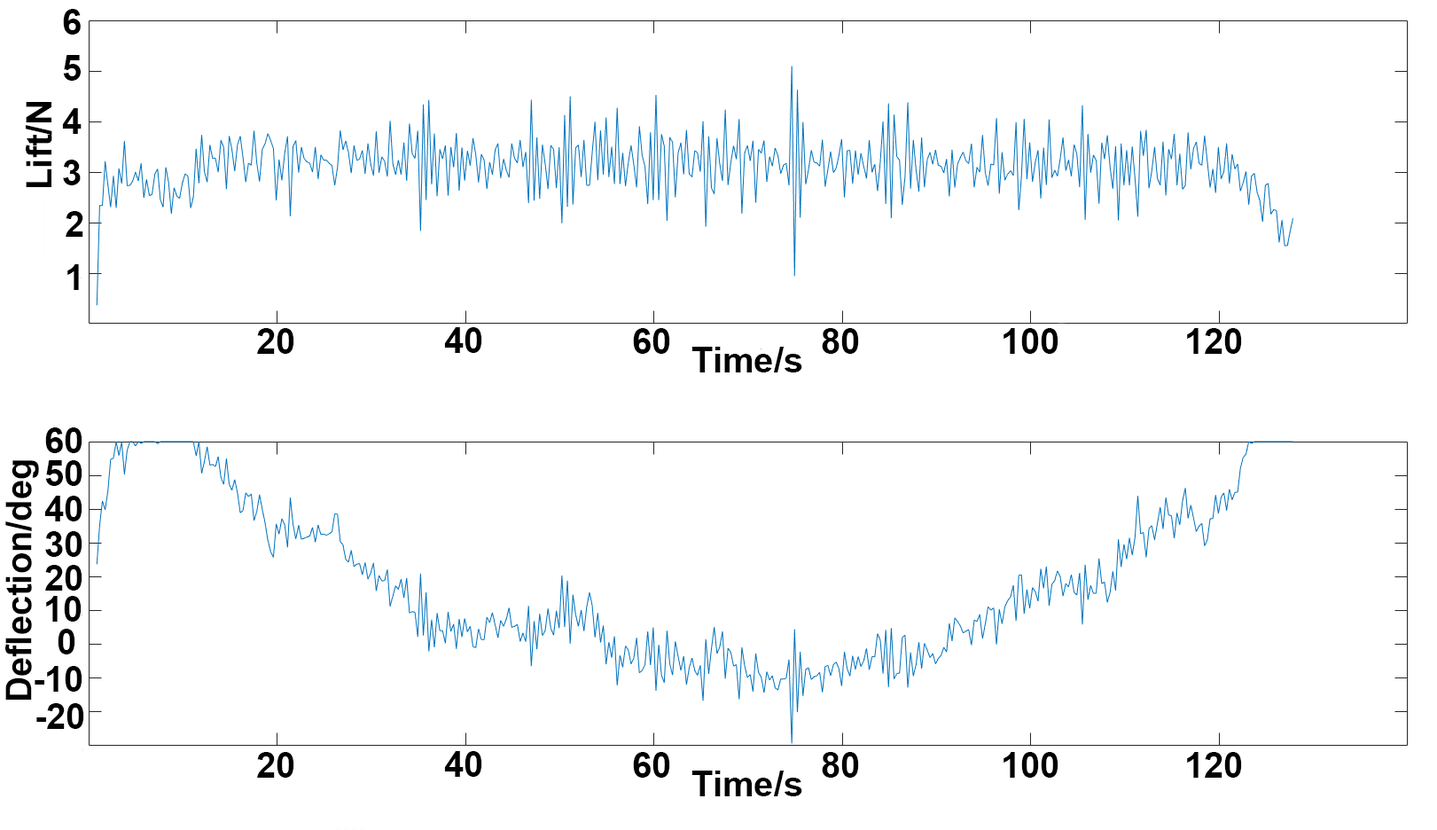
<style>
.page{position:relative;width:1437px;height:830px;background:#ffffff}
.page>*{position:absolute;margin:0}
.t1{font:35.5px "Arial-BoldMT";color:#000000}
.t2{font:35.2px "Arial-BoldMT";color:#000000}
.t3{font:35.4px "Arial-BoldMT";color:#000000}
</style>
<div class="page">
<p class="t1" style="left:63px;top:9px;width:18px;height:26px">6</p>
<p class="t1" style="left:63px;top:55px;width:18px;height:26px">5</p>
<p class="t2" style="left:26px;top:102px;width:26px;height:85px;rotate:-90deg">Lift/N</p>
<p class="t1" style="left:62px;top:108px;width:20px;height:26px">4</p>
<p class="t1" style="left:63px;top:160px;width:18px;height:25px">3</p>
<p class="t1" style="left:66px;top:211px;width:17px;height:26px">2</p>
<p class="t1" style="left:67px;top:264px;width:12px;height:26px">1</p>
<p class="t1" style="left:257px;top:328px;width:37px;height:26px">20</p>
<p class="t1" style="left:444px;top:327px;width:38px;height:26px">40</p>
<p class="t1" style="left:633px;top:328px;width:37px;height:26px">60</p>
<p class="t1" style="left:822px;top:328px;width:37px;height:26px">80</p>
<p class="t1" style="left:1004px;top:328px;width:55px;height:26px">100</p>
<p class="t1" style="left:1187px;top:328px;width:55px;height:26px">120</p>
<p class="t1" style="left:691px;top:347px;width:111px;height:25px">Time/s</p>
<p class="t1" style="left:45px;top:427px;width:37px;height:26px">60</p>
<p class="t3" style="left:5px;top:460px;width:34px;height:239px;rotate:-90deg">Deflection/deg</p>
<p class="t1" style="left:45px;top:460px;width:37px;height:26px">50</p>
<p class="t1" style="left:44px;top:496px;width:38px;height:25px">40</p>
<p class="t1" style="left:45px;top:531px;width:37px;height:26px">30</p>
<p class="t1" style="left:45px;top:565px;width:37px;height:25px">20</p>
<p class="t2" style="left:46px;top:596px;width:36px;height:25px">10</p>
<p class="t2" style="left:58px;top:629px;width:17px;height:25px">0</p>
<p class="t1" style="left:35px;top:666px;width:47px;height:25px">-10</p>
<p class="t1" style="left:36px;top:703px;width:48px;height:26px">-20</p>
<p class="t1" style="left:257px;top:752px;width:37px;height:25px">20</p>
<p class="t1" style="left:444px;top:751px;width:38px;height:26px">40</p>
<p class="t1" style="left:633px;top:752px;width:37px;height:25px">60</p>
<p class="t1" style="left:822px;top:752px;width:37px;height:25px">80</p>
<p class="t1" style="left:1004px;top:752px;width:55px;height:25px">100</p>
<p class="t1" style="left:1187px;top:752px;width:55px;height:25px">120</p>
<p class="t1" style="left:691px;top:770px;width:111px;height:26px">Time/s</p>
</div>
